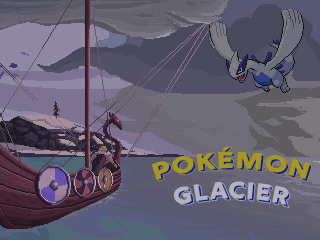
<style>
.page{position:relative;width:320px;height:240px}
.page>*{position:absolute;margin:0}
.t1{font:25px "Rig-BoldReverse"}
</style>
<div class="page">
<p class="t1" style="left:151px;top:146px;width:162px;height:62px;text-align:center">PokÉmon<br>Glacier</p>
</div>
